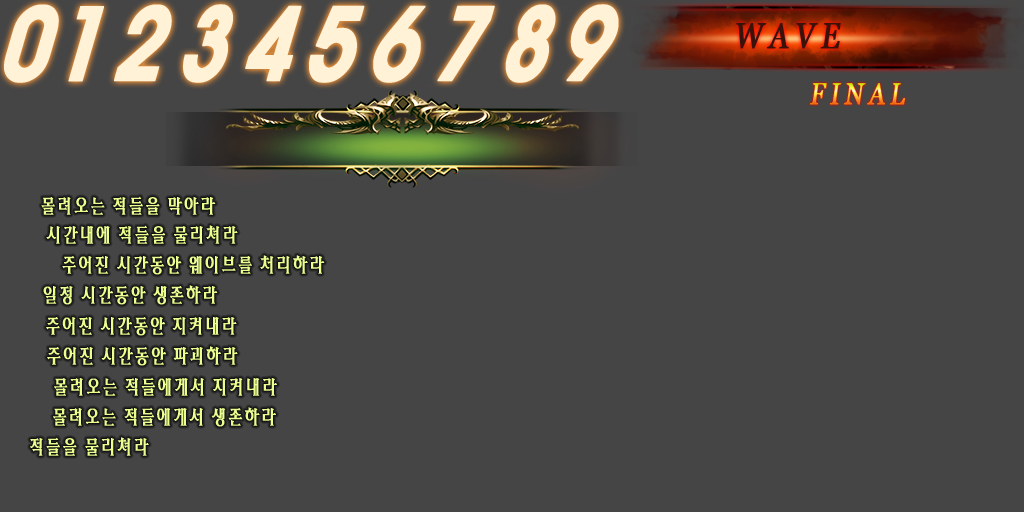
<style>
.page{position:relative;width:1024px;height:512px;background:#454545}
.page>*{position:absolute;margin:0}
.t1{font:30px "Georgia";letter-spacing:0.2em;font-weight:bold;font-style:italic;scale:0.8 1}
.t2{font:20px "HYcysM";color:#ebff91;font-weight:bold;scale:0.8 1}
</style>
<div class="page">
<p class="t1" style="left:810px;top:83px;width:96px;height:22px">FINAL</p>
<p class="t2" style="left:41px;top:196px;width:175px;height:19px">몰려오는 적들을 막아라</p>
<p class="t2" style="left:46px;top:225px;width:192px;height:19px">시간내에 적들을 물리쳐라</p>
<p class="t2" style="left:62px;top:255px;width:263px;height:20px">주어진 시간동안 웨이브를 처리하라</p>
<p class="t2" style="left:43px;top:285px;width:175px;height:20px">일정 시간동안 생존하라</p>
<p class="t2" style="left:46px;top:317px;width:191px;height:19px">주어진 시간동안 지켜내라</p>
<p class="t2" style="left:47px;top:346px;width:191px;height:20px">주어진 시간동안 파괴하라</p>
<p class="t2" style="left:54px;top:377px;width:223px;height:19px">몰려오는 적들에게서 지켜내라</p>
<p class="t2" style="left:53px;top:407px;width:223px;height:20px">몰려오는 적들에게서 생존하라</p>
<p class="t2" style="left:30px;top:437px;width:119px;height:19px">적들을 물리쳐라</p>
</div>
